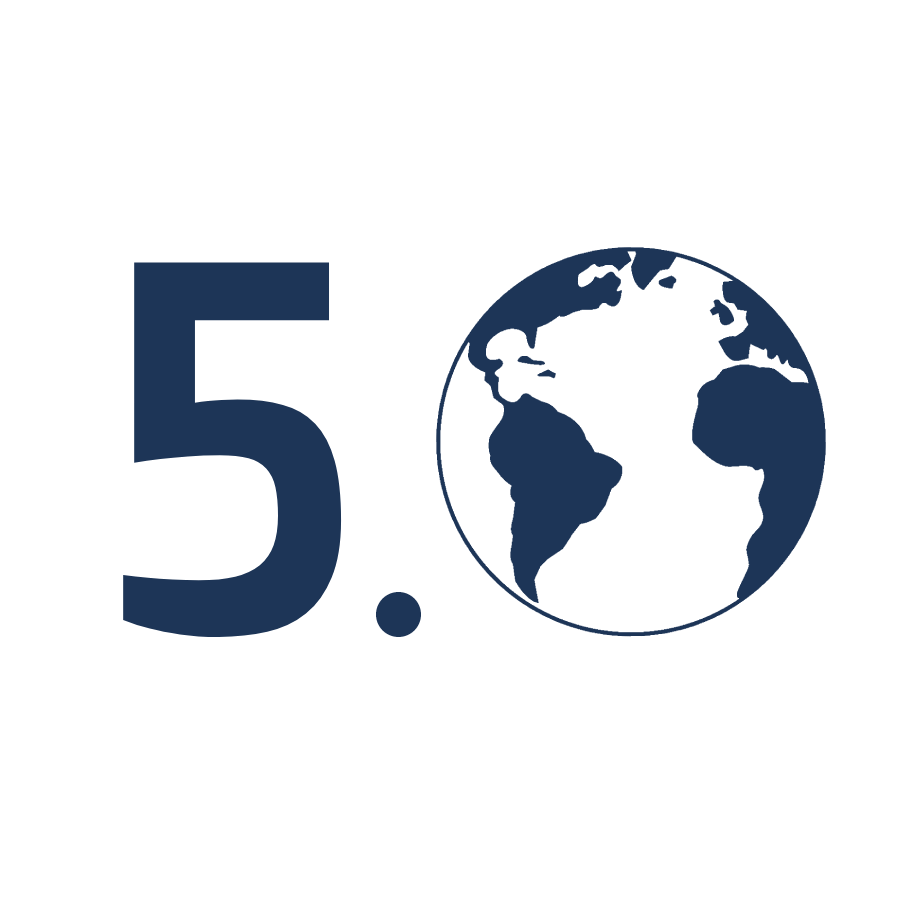
<style>
.page{position:relative;width:900px;height:900px;background:#ffffff}
.page>*{position:absolute;margin:0}
.t1{font:525px "DoppioOne-Regular";color:#1d3557}
</style>
<div class="page">
<p class="t1" style="left:123px;top:262px;width:219px;height:375px">5</p>
</div>
